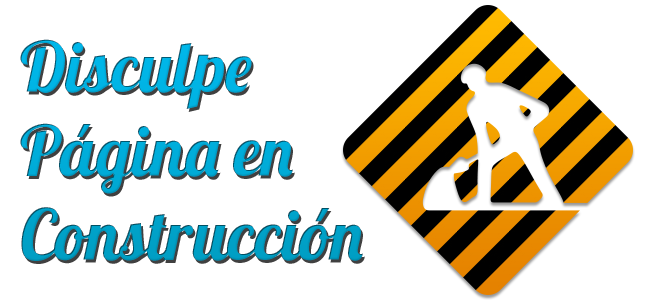
<style>
.page{position:relative;width:650px;height:300px;background:#ffffff}
.page>*{position:absolute;margin:0}
.t1{font:70px "Lobster1.4"}
</style>
<div class="page">
<p class="t1" style="left:20px;top:39px;width:343px;height:222px">Disculpe<br>Página en<br>Construcción</p>
</div>
